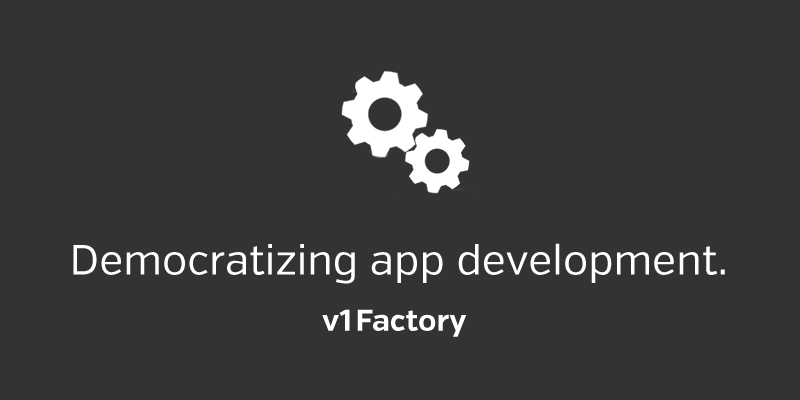
<style>
.page{position:relative;width:800px;height:400px;background:#333333}
.page>*{position:absolute;margin:0}
.t1{font:42px "VerbRegular";color:#ffffff}
.t2{font:30px "VerbRegular-Bold";color:#ffffff}
</style>
<div class="page">
<p class="t1" style="left:73px;top:243px;width:652px;height:41px">Democratizing app development.</p>
<p class="t2" style="left:322px;top:309px;width:145px;height:28px">v1Factory</p>
</div>
